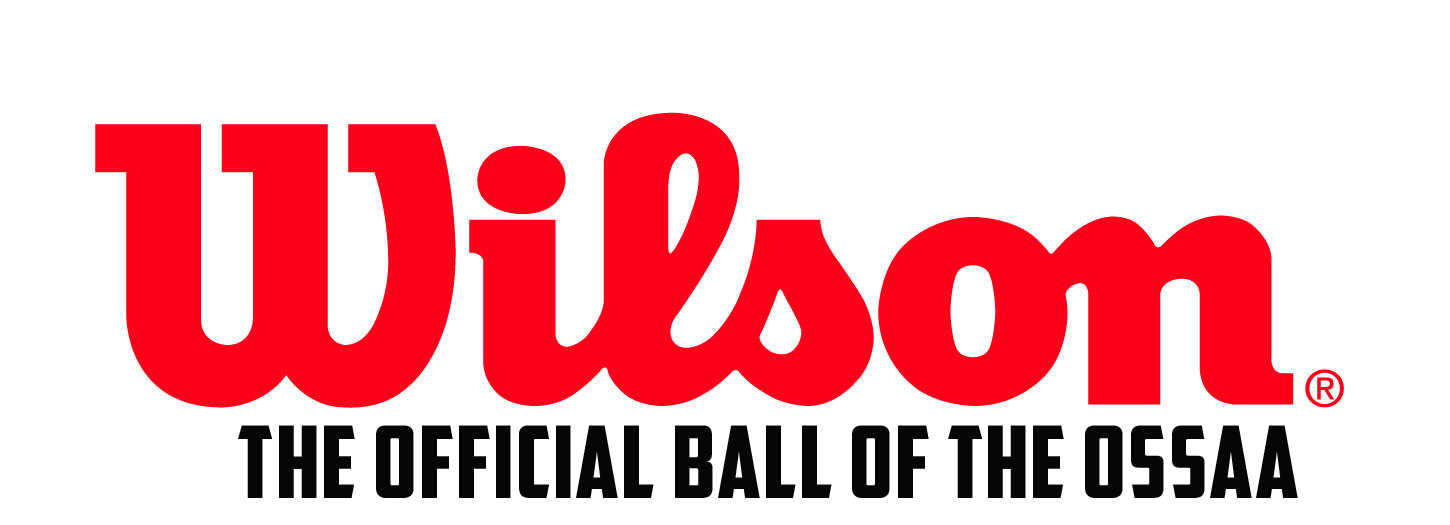
<style>
.page{position:relative;width:1450px;height:525px;background:#ffffff}
.page>*{position:absolute;margin:0}
.t1{font:100px "AmericanCaptain";letter-spacing:0.02em;color:#060606}
</style>
<div class="page">
<p class="t1" style="left:238px;top:425px;width:1060px;height:73px">THE OFFICIAL BALL OF THE OSSAA</p>
</div>
